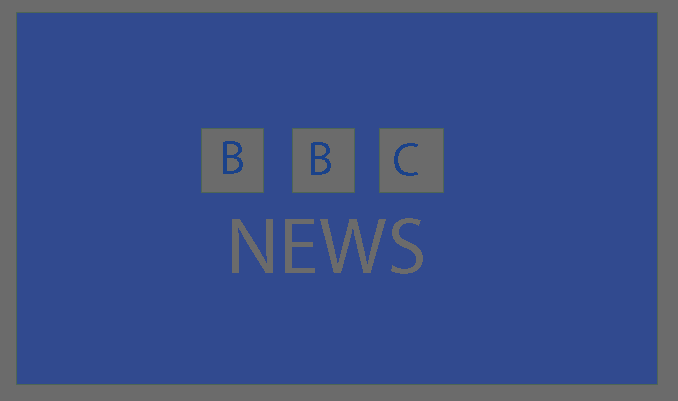
<style>
.page{position:relative;width:678px;height:401px;background:#314a8f}
.page>*{position:absolute;margin:0}
.t1{font:48px "MyriadPro-Regular";color:#1a428a}
.t2{font:80px "MyriadPro-Regular";color:#6b6b6b}
</style>
<div class="page">
<p class="t1" style="left:223px;top:141px;width:20px;height:33px">B</p>
<p class="t1" style="left:311px;top:142px;width:20px;height:33px">B</p>
<p class="t1" style="left:394px;top:143px;width:24px;height:33px">C</p>
<p class="t2" style="left:232px;top:218px;width:191px;height:56px">NEWS</p>
</div>
